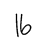
<style>
.page{position:relative;width:38px;height:49px;background:#ffffff}
.page>*{position:absolute;margin:0}
.t1{font:72px "SeptemberMornings";color:#000000}
</style>
<div class="page">
<p class="t1" style="left:15px;top:13px;width:17px;height:25px">16</p>
</div>
